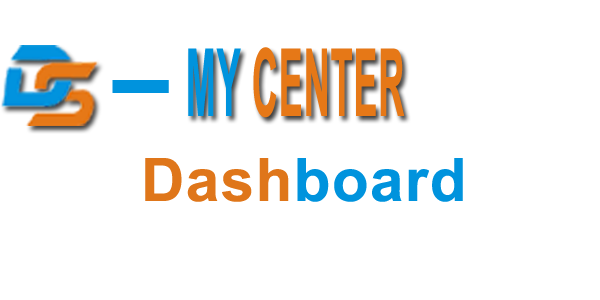
<style>
.page{position:relative;width:600px;height:300px;background:#ffffff}
.page>*{position:absolute;margin:0}
.t1{font:94.2px "Arial-BoldMT";letter-spacing:0.025em;color:#e67817;scale:0.38 1}
.t2{font:94.2px "Arial-BoldMT";letter-spacing:0.025em;color:#0093dd;scale:0.38 1}
.t3{font:94.2px "Arial-BoldMT";letter-spacing:0.025em;color:#0093dd;scale:2.2 1}
.t4{font:60px "Arial-BoldMT";letter-spacing:0.025em;color:#0093dd}
.t5{font:60px "Arial-BoldMT";letter-spacing:0.025em;color:#df761a}
</style>
<div class="page">
<p class="t1" style="left:188px;top:47px;width:217px;height:71px"><span class="t2">  MY </span>CENTER</p>
<p class="t3" style="left:112px;top:80px;width:57px;height:13px">-</p>
<p class="t4" style="left:145px;top:158px;width:318px;height:44px"><span class="t5">Dash</span>board</p>
</div>
